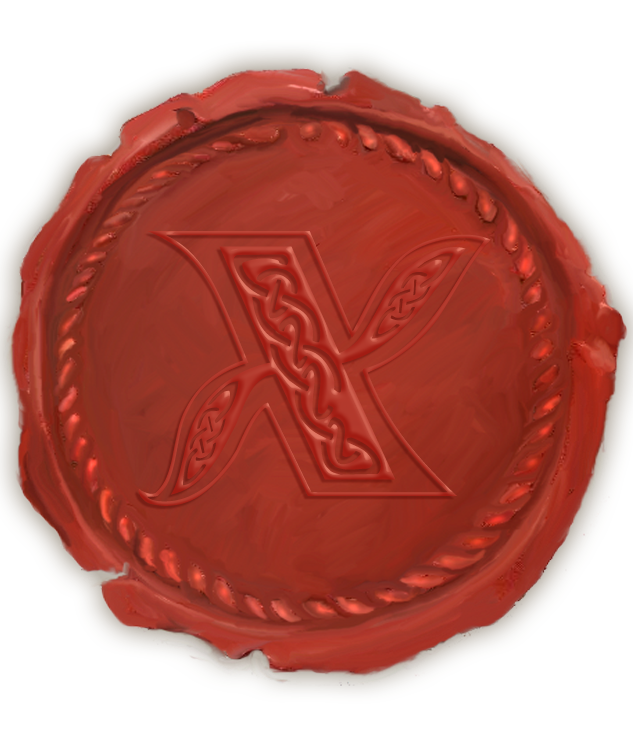
<style>
.page{position:relative;width:633px;height:756px;background:#ffffff}
.page>*{position:absolute;margin:0}
.t1{font:264.7px "CelticmdDecorativeWDropCaps";color:#b03529}
</style>
<div class="page">
<p class="t1" style="left:138px;top:231px;width:353px;height:275px">X</p>
</div>
